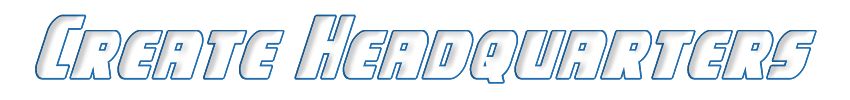
<style>
.page{position:relative;width:850px;height:100px;background:#ffffff}
.page>*{position:absolute;margin:0}
.t1{font:75px "CampJusticeOutlineItalic";color:#206daf}
</style>
<div class="page">
<p class="t1" style="left:35px;top:14px;width:782px;height:70px">Create Headquarters</p>
</div>
